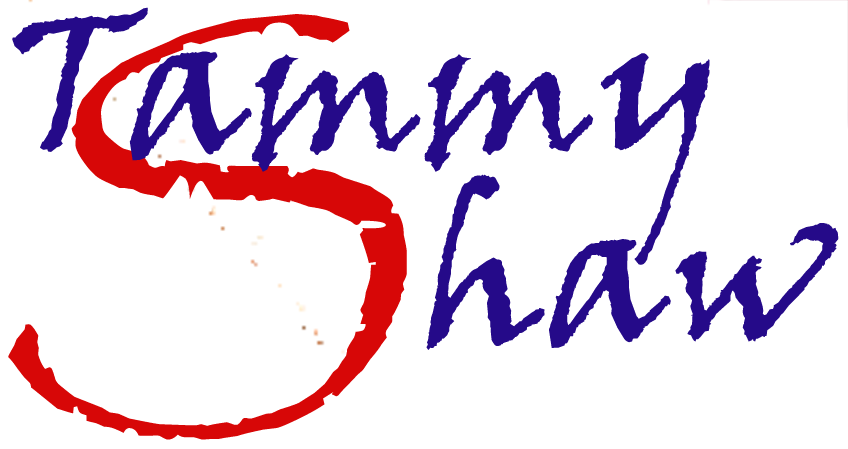
<style>
.page{position:relative;width:848px;height:449px;background:#ffffff}
.page>*{position:absolute;margin:0}
.t1{font:437.9px "Papyrus-Regular";color:#d70707}
.t2{font:198.1px/187.7px "VinerHandITC";color:#250a89}
</style>
<div class="page">
<p class="t1" style="left:8px;top:14px;width:399px;height:426px">S</p>
<p class="t2" style="left:12px;top:7px;width:827px;height:343px">Tammy<br>         haw</p>
</div>
